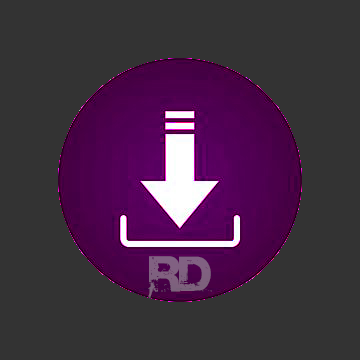
<style>
.page{position:relative;width:360px;height:360px;background:#333333}
.page>*{position:absolute;margin:0}
.t1{font:43.4px "Base02";color:#816181}
</style>
<div class="page">
<p class="t1" style="left:148px;top:256px;width:64px;height:43px">RD</p>
</div>
